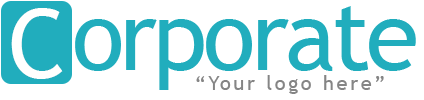
<style>
.page{position:relative;width:424px;height:100px;background:#ffffff}
.page>*{position:absolute;margin:0}
.t1{font:96px "TrebuchetMS";letter-spacing:-0.04em;color:#21adbd}
.t2{font:96px "TrebuchetMS";color:#fffffe}
.t3{font:19.6px "TrebuchetMS";letter-spacing:0.14em;color:#858585}
</style>
<div class="page">
<p class="t1" style="left:75px;top:6px;width:341px;height:84px">orporate</p>
<p class="t2" style="left:11px;top:8px;width:52px;height:71px">C</p>
<p class="t3" style="left:196px;top:75px;width:188px;height:19px">“Your logo here”</p>
</div>
